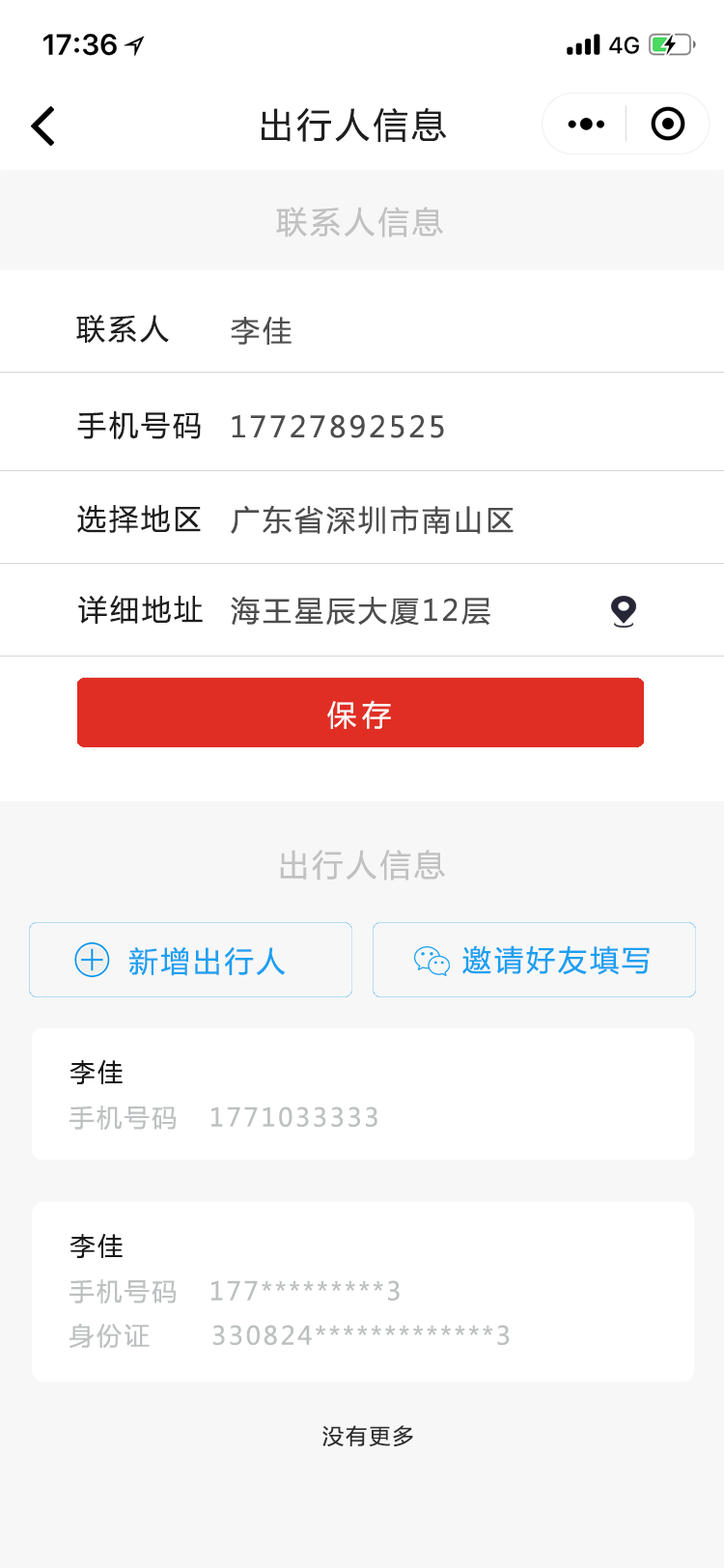
<style>
.page{position:relative;width:724px;height:1568px;background:#ffffff}
.page>*{position:absolute;margin:0}
.t1{font:34.8px "MicrosoftYaHei";letter-spacing:0.1em;color:#201f20}
.t2{font:30.9px "MicrosoftYaHei";letter-spacing:0.1em;color:#c1c1c1}
.t3{font:29px "MicrosoftYaHei";letter-spacing:0.1em;color:#1f1e1e}
.t4{font:29px "MicrosoftYaHei";letter-spacing:0.1em;color:#4e4d4d}
.t5{font:29px "MicrosoftYaHei";letter-spacing:0.2em}
.t6{font:29px "MicrosoftYaHei";letter-spacing:0.2em;color:#fcf8f8}
.t7{font:29px "MicrosoftYaHei";letter-spacing:0.1em;color:#1ba0f0}
.t8{font:25.1px "MicrosoftYaHei";letter-spacing:0.1em;color:#181818}
.t9{font:25.1px "MicrosoftYaHei";letter-spacing:0.1em;color:#bdc0c1}
.t10{font:21.2px "MicrosoftYaHei";letter-spacing:0.1em;color:#2d2e2e}
</style>
<div class="page">
<p class="t1" style="left:262px;top:107px;width:185px;height:35px">出行人信息</p>
<p class="t2" style="left:276px;top:207px;width:167px;height:31px">联系人信息</p>
<p class="t3" style="left:76px;top:315px;width:93px;height:28px">联系人</p>
<p class="t4" style="left:231px;top:316px;width:61px;height:29px">李佳</p>
<p class="t3" style="left:77px;top:411px;width:124px;height:29px">手机号码</p>
<p class="t4" style="left:232px;top:414px;width:212px;height:24px">17727892525</p>
<p class="t3" style="left:77px;top:505px;width:124px;height:28px">选择地区</p>
<p class="t4" style="left:231px;top:505px;width:283px;height:30px">广东省深圳市南山区</p>
<p class="t3" style="left:78px;top:595px;width:125px;height:29px">详细地址</p>
<p class="t4" style="left:231px;top:596px;width:259px;height:30px">海王星辰大厦12层</p>
<p class="t5" style="left:327px;top:699px;width:64px;height:29px">保存</p>
<p class="t6" style="left:327px;top:700px;width:64px;height:29px">保存</p>
<p class="t2" style="left:280px;top:850px;width:165px;height:31px">出行人信息</p>
<p class="t7" style="left:128px;top:947px;width:158px;height:29px">新增出行人</p>
<p class="t7" style="left:462px;top:945px;width:188px;height:30px">邀请好友填写</p>
<p class="t8" style="left:70px;top:1059px;width:53px;height:25px">李佳</p>
<p class="t9" style="left:70px;top:1106px;width:308px;height:25px">手机号码   1771033333</p>
<p class="t8" style="left:70px;top:1233px;width:53px;height:25px">李佳</p>
<p class="t9" style="left:70px;top:1279px;width:330px;height:25px">手机号码   177*********3</p>
<p class="t9" style="left:70px;top:1323px;width:440px;height:26px">身份证      330824*************3</p>
<p class="t10" style="left:322px;top:1425px;width:91px;height:22px">没有更多</p>
</div>
